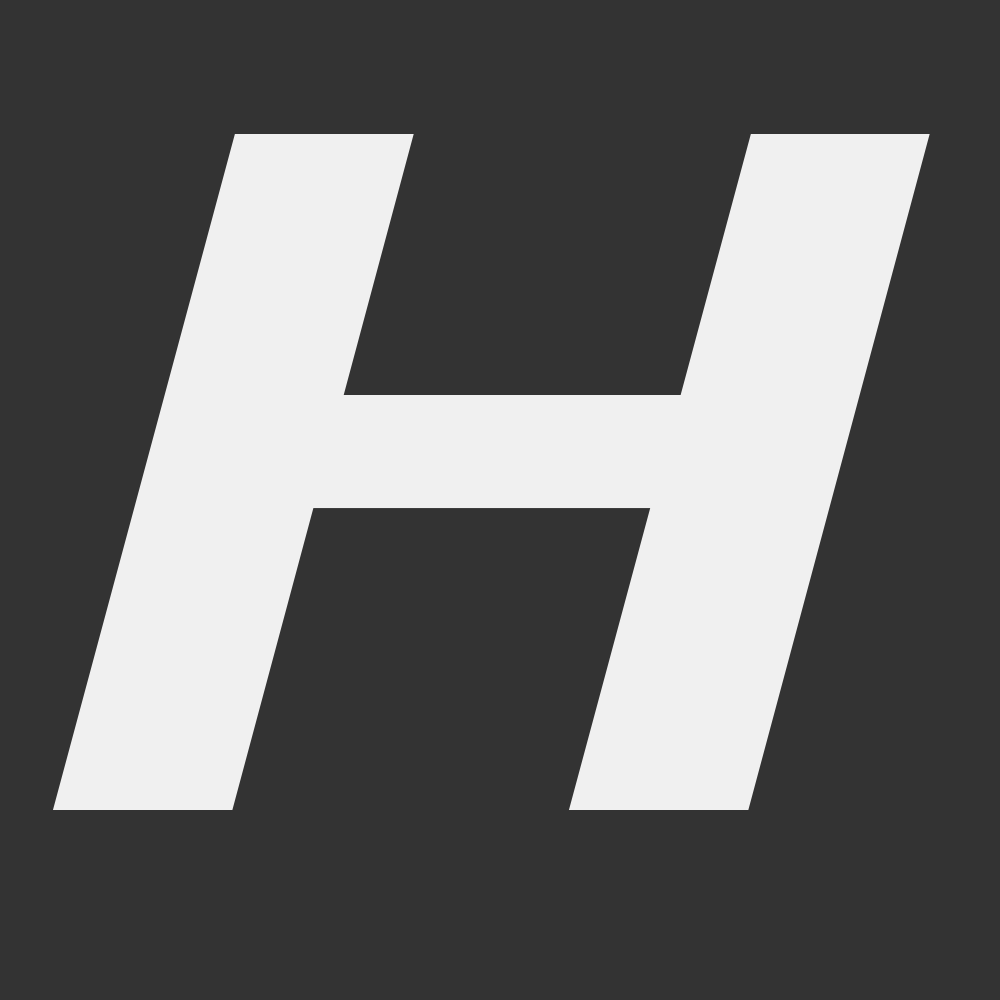
<style>
.page{position:relative;width:1000px;height:1000px;background:#333333}
.page>*{position:absolute;margin:0}
.t1{font:943.9px "Arial-BoldItalicMT";letter-spacing:0.1em;color:#f0f0f0;scale:1.29 1}
</style>
<div class="page">
<p class="t1" style="left:52px;top:134px;width:878px;height:676px">H</p>
</div>
